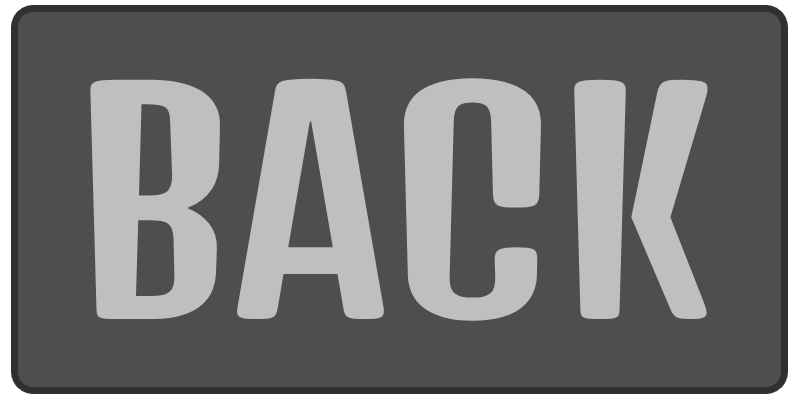
<style>
.page{position:relative;width:800px;height:400px;background:#4e4e4e}
.page>*{position:absolute;margin:0}
.t1{font:290px "DenkOne-Regular";color:#bfbfbf}
</style>
<div class="page">
<p class="t1" style="left:90px;top:78px;width:618px;height:243px">BACK</p>
</div>
